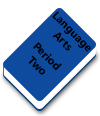
<style>
.page{position:relative;width:100px;height:116px;background:#ffffff}
.page>*{position:absolute;margin:0}
.t1{font:11.2px "LaoUI-Bold";color:#000000}
.t2{font:11.4px "LaoUI-Bold";color:#000000}
</style>
<div class="page">
<p class="t1" style="left:52px;top:11px;width:39px;height:41px;rotate:45deg">Language Arts</p>
<p class="t2" style="left:28px;top:42px;width:34px;height:33px;text-align:center;rotate:45deg">Period <br>Two</p>
</div>
